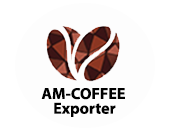
<style>
.page{position:relative;width:170px;height:135px;background:#fdfdfd}
.page>*{position:absolute;margin:0}
.t1{font:16px "MyriadPro-Bold";color:#000000}
</style>
<div class="page">
<p class="t1" style="left:41px;top:88px;width:84px;height:12px">AM-COFFEE</p>
<p class="t1" style="left:54px;top:102px;width:62px;height:15px">Exporter</p>
</div>
